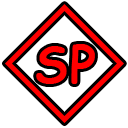
<style>
.page{position:relative;width:128px;height:128px;background:#ffffff}
.page>*{position:absolute;margin:0}
.t1{font:50px "ComicSansMS";color:#ff0000;font-weight:bold}
</style>
<div class="page">
<p class="t1" style="left:36px;top:44px;width:59px;height:40px">SP</p>
</div>
